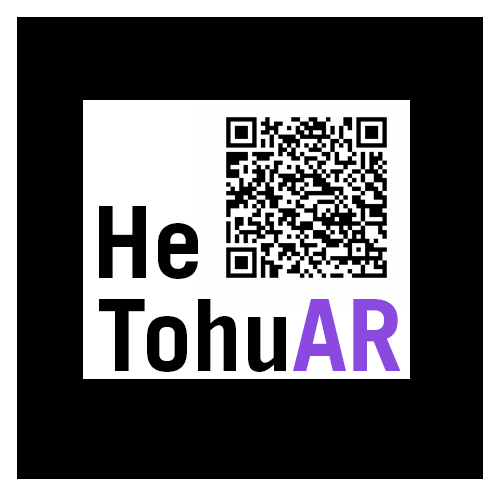
<style>
.page{position:relative;width:500px;height:500px;background:#000000}
.page>*{position:absolute;margin:0}
.t1{font:100px "TradeGothic-Bold";color:#010101}
.t2{font:100px "TradeGothic-Bold";color:#000000}
.t3{font:100px "TradeGothic-Bold";color:#8c49e0}
</style>
<div class="page">
<p class="t1" style="left:99px;top:206px;width:99px;height:73px">He</p>
<p class="t2" style="left:99px;top:299px;width:302px;height:73px">Tohu<span class="t3">AR</span></p>
</div>
